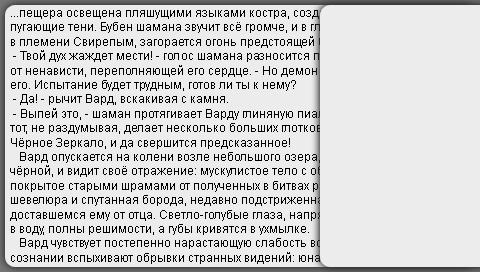
<style>
.page{position:relative;width:480px;height:272px;background:#ececec}
.page>*{position:absolute;margin:0}
.t1{font:12px "ArialMT";color:#000000}
</style>
<div class="page">
<p class="t1" style="left:10px;top:10px;width:459px;height:254px">...пещера освещена пляшущими языками костра, создающими на стенах <br>пугающие тени. Бубен шамана звучит всё громче, и в глазах Варда, прозванного <br>в племени Свирепым, загорается огонь предстоящей битвы.<br> - Твой дух жаждет мести! - голос шамана разносится по пещере, и Вард рычит <br>от ненависти, переполняющей его сердце. - Но демон силён, и тебе не победить <br>его. Испытание будет трудным, готов ли ты к нему?<br> - Да! - рычит Вард, вскакивая с камня.<br> - Выпей это, - шаман протягивает Варду глиняную пиалу с тёмной жидкостью, и <br>тот, не раздумывая, делает несколько больших глотков. - А теперь посмотри в <br>Чёрное Зеркало, и да свершится предсказанное!<br>   Вард опускается на колени возле небольшого озера, вода в котором кажется <br>чёрной, и видит своё отражение: мускулистое тело с обнажённым торсом, <br>покрытое старыми шрамами от полученных в битвах ран, густая рыжая <br>шевелюра и спутанная борода, недавно подстриженная остым ножом, <br>доставшемся ему от отца. Светло-голубые глаза, напряжённо вглядывающиеся <br>в воду, полны решимости, а губы кривятся в ухмылке.<br>   Вард чувствует постепенно нарастающую слабость во всём теле, и в его <br>сознании вспыхивают обрывки странных видений: юная дева в белом платье,</p>
</div>
